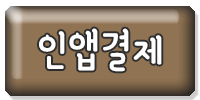
<style>
.page{position:relative;width:200px;height:100px;background:#907353}
.page>*{position:absolute;margin:0}
.t1{font:50px "YanoljaYacheR";color:#ffffff}
</style>
<div class="page">
<p class="t1" style="left:39px;top:28px;width:123px;height:44px">인앱결제</p>
</div>
